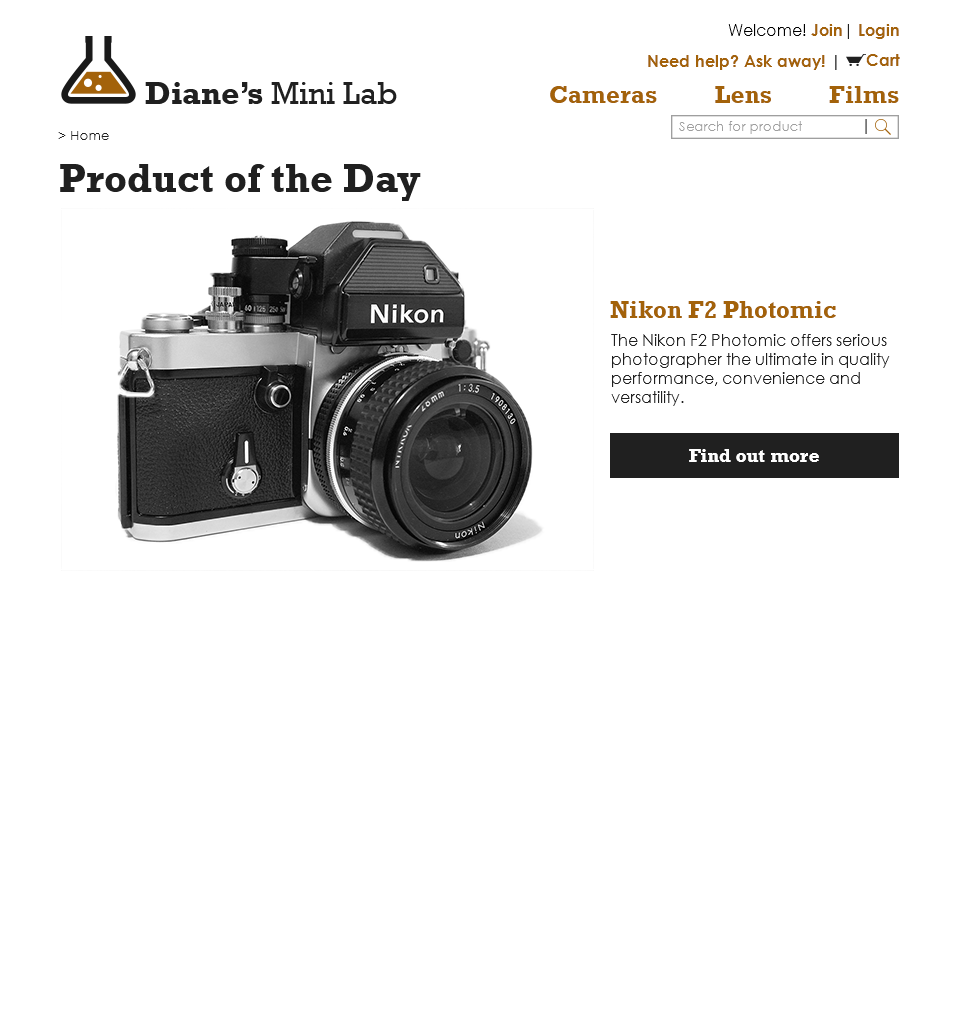
<style>
.page{position:relative;width:960px;height:1013px;background:#ffffff}
.page>*{position:absolute;margin:0}
.t1{font:16px "CenturyGothic";color:#000000}
.t2{font:16px "CenturyGothic-Bold";color:#a3620a}
.t3{font:16px "CenturyGothic";color:#202020}
.t4{font:12px "CenturyGothic-Bold";color:#a3620a}
.t5{font:12px "CenturyGothic-Bold";color:#202020}
.t6{font:32px "Rockwell";color:#202020}
.t7{font:32px "Rockwell-Bold";color:#202020}
.t8{font:24px "Rockwell-Bold";color:#a3620a}
.t9{font:13.3px "CenturyGothic";color:#9f9f9f}
.t10{font:16px "CenturyGothic"}
.t11{font:13.3px "CenturyGothic";color:#202020}
.t12{font:40px "Rockwell-Bold";color:#202020}
.t13{font:18.7px "Rockwell-Bold";color:#ffffff}
</style>
<div class="page">
<p class="t1" style="left:728px;top:24px;width:171px;height:15px">Welcome! <span class="t2">Join</span><span class="t3">| </span><span class="t2">Login</span></p>
<p class="t2" style="left:866px;top:54px;width:34px;height:12px">Cart</p>
<p class="t4" style="left:648px;top:55px;width:189px;height:15px">Need help? Ask away! <span class="t5">|</span></p>
<p class="t6" style="left:145px;top:82px;width:252px;height:22px"><span class="t7">Diane’s </span>Mini Lab</p>
<p class="t8" style="left:550px;top:86px;width:107px;height:17px">Cameras</p>
<p class="t8" style="left:715px;top:86px;width:56px;height:17px">Lens</p>
<p class="t8" style="left:829px;top:86px;width:70px;height:17px">Films</p>
<p class="t9" style="left:679px;top:121px;width:123px;height:13px">Search for product</p>
<p class="t10" style="left:865px;top:119px;width:2px;height:15px">|</p>
<p class="t11" style="left:58px;top:131px;width:51px;height:9px">&gt; Home</p>
<p class="t12" style="left:60px;top:164px;width:361px;height:37px">Product of the Day</p>
<p class="t8" style="left:610px;top:301px;width:226px;height:17px">Nikon F2 Photomic</p>
<p class="t3" style="left:611px;top:334px;width:279px;height:72px">The Nikon F2 Photomic offers serious photographer the ultimate in quality performance, convenience and versatility.</p>
<p class="t13" style="left:689px;top:449px;width:130px;height:13px">Find out more</p>
</div>
